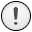
<style>
.page{position:relative;width:32px;height:32px;background:#ffffff}
.page>*{position:absolute;margin:0}
.t1{font:28px "CourierNewPS-BoldMT";color:#504e4e}
</style>
<div class="page">
<p class="t1" style="left:13px;top:7px;width:5px;height:18px">!</p>
</div>
